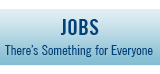
<style>
.page{position:relative;width:160px;height:74px;background:#ffffff}
.page>*{position:absolute;margin:0}
.t1{font:22px "TradeGothicLT-BoldCondTwenty";color:#00427a;text-transform:uppercase}
.t2{font:14px "TradeGothicLT-CondEighteen";color:#00427a}
</style>
<div class="page">
<p class="t1" style="left:61px;top:19px;width:38px;height:16px">jobs</p>
<p class="t2" style="left:5px;top:45px;width:148px;height:12px">There’s Something for Everyone</p>
</div>
